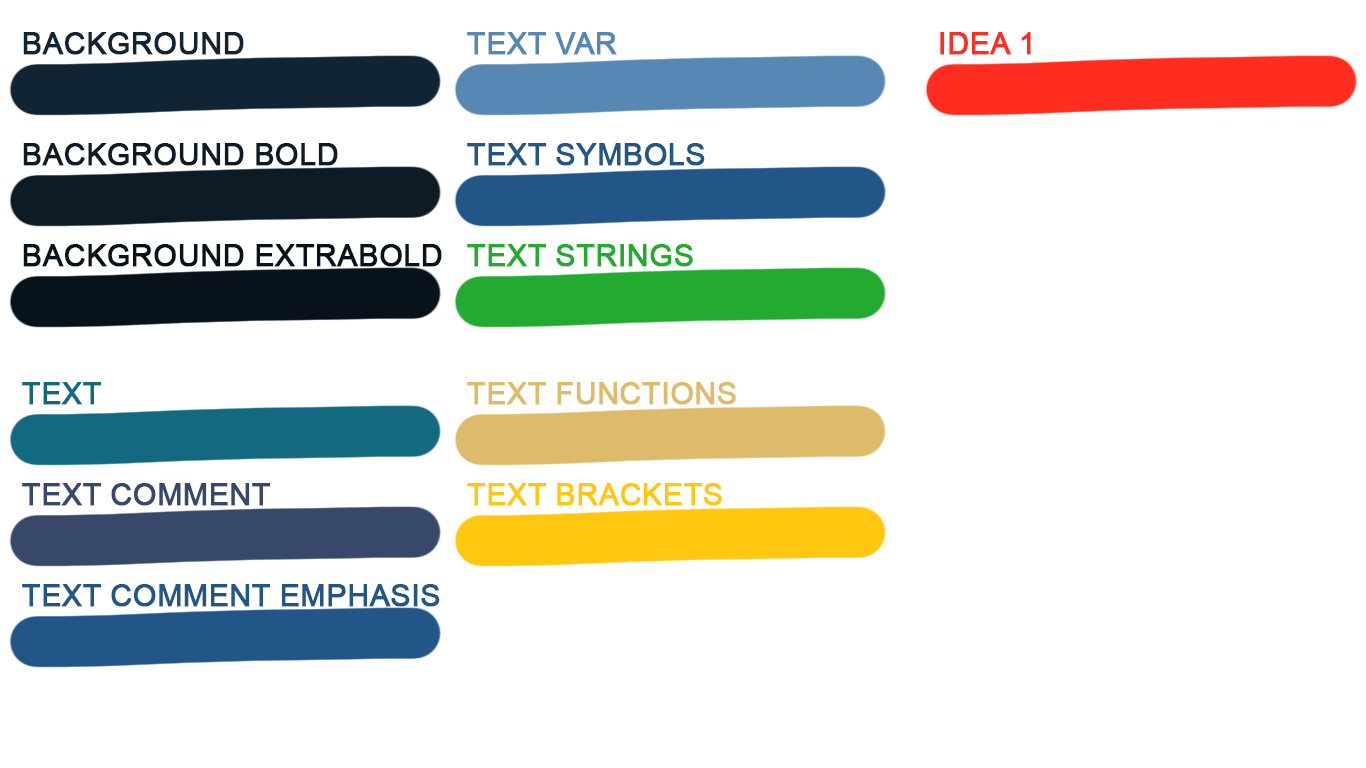
<style>
.page{position:relative;width:1366px;height:768px;background:#ffffff}
.page>*{position:absolute;margin:0}
.t1{font:30px "ArialMT";color:#112433;text-transform:uppercase;font-weight:bold}
.t2{font:30px "ArialMT";color:#5788b4;text-transform:uppercase;font-weight:bold}
.t3{font:30px "ArialMT";color:#ff2d20;text-transform:uppercase;font-weight:bold}
.t4{font:30px "ArialMT";color:#0d1b26;text-transform:uppercase;font-weight:bold}
.t5{font:30px "ArialMT";color:#225588;text-transform:uppercase;font-weight:bold}
.t6{font:30px "ArialMT";color:#08121a;text-transform:uppercase;font-weight:bold}
.t7{font:30px "ArialMT";color:#22aa31;text-transform:uppercase;font-weight:bold}
.t8{font:30px "ArialMT";color:#136a80;text-transform:uppercase;font-weight:bold}
.t9{font:30px "ArialMT";color:#ddbb6b;text-transform:uppercase;font-weight:bold}
.t10{font:30px "ArialMT";color:#38486a;text-transform:uppercase;font-weight:bold}
.t11{font:30px "ArialMT";color:#ffc710;text-transform:uppercase;font-weight:bold}
</style>
<div class="page">
<p class="t1" style="left:23px;top:32px;width:221px;height:23px">Background</p>
<p class="t2" style="left:467px;top:32px;width:150px;height:23px">Text var</p>
<p class="t3" style="left:940px;top:32px;width:91px;height:23px">Idea 1</p>
<p class="t4" style="left:23px;top:143px;width:315px;height:23px">Background Bold</p>
<p class="t5" style="left:467px;top:143px;width:238px;height:23px">Text Symbols</p>
<p class="t6" style="left:23px;top:244px;width:419px;height:23px">Background ExtraBold</p>
<p class="t7" style="left:467px;top:244px;width:226px;height:23px">Text Strings</p>
<p class="t8" style="left:22px;top:382px;width:80px;height:23px">Text</p>
<p class="t9" style="left:467px;top:382px;width:269px;height:23px">Text Functions</p>
<p class="t10" style="left:22px;top:483px;width:249px;height:23px">Text Comment</p>
<p class="t11" style="left:467px;top:483px;width:255px;height:23px">Text Brackets</p>
<p class="t5" style="left:22px;top:584px;width:418px;height:23px">Text Comment Emphasis</p>
</div>
